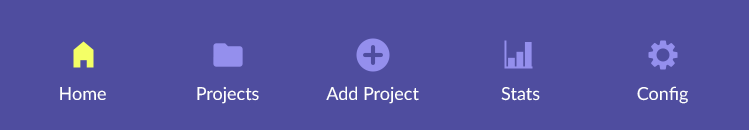
<style>
.page{position:relative;width:749px;height:130px;background:#4f4d9f}
.page>*{position:absolute;margin:0}
.t1{font:18px "Lato-Regular";color:#ffffff}
</style>
<div class="page">
<p class="t1" style="left:60px;top:87px;width:46px;height:13px">Home</p>
<p class="t1" style="left:197px;top:86px;width:62px;height:18px">Projects</p>
<p class="t1" style="left:326px;top:86px;width:93px;height:18px">Add Project</p>
<p class="t1" style="left:501px;top:87px;width:39px;height:14px">Stats</p>
<p class="t1" style="left:637px;top:86px;width:51px;height:18px">Config</p>
</div>
